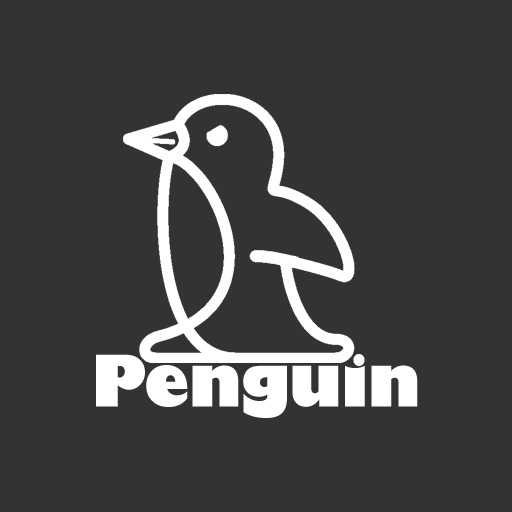
<style>
.page{position:relative;width:512px;height:512px;background:#333333}
.page>*{position:absolute;margin:0}
.t1{font:69.4px "GillSans-UltraBold";letter-spacing:-0.015em;color:#ffffff;scale:0.95 1}
</style>
<div class="page">
<p class="t1" style="left:96px;top:354px;width:322px;height:64px">Penguin</p>
</div>
